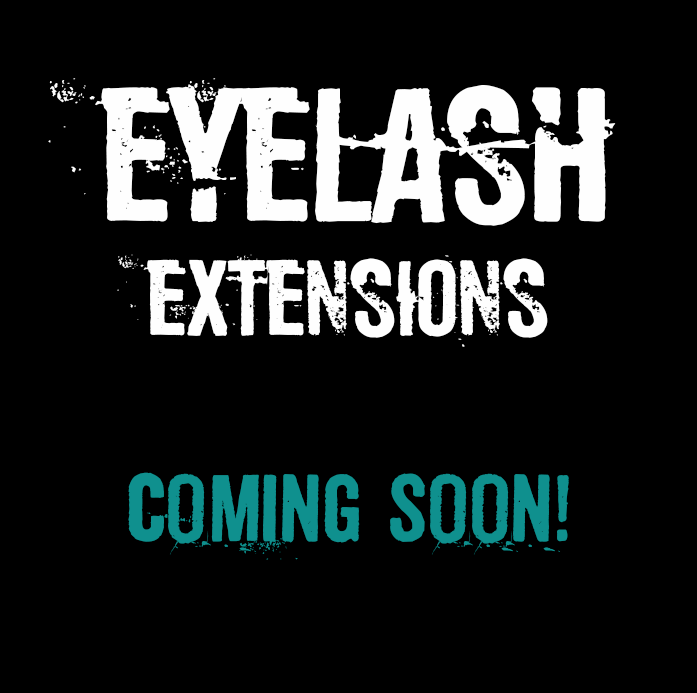
<style>
.page{position:relative;width:697px;height:693px;background:#000000}
.page>*{position:absolute;margin:0}
.t1{font:208.3px "SonicBarrier";color:#fefefe}
.t2{font:116.7px "SonicBarrier";color:#fefefe}
.t3{font:104.2px "SonicBarrier";color:#0f908e}
.t4{font:75px "SonicBarrier";color:#0f908e}
</style>
<div class="page">
<p class="t1" style="left:48px;top:78px;width:568px;height:148px">eyelash</p>
<p class="t2" style="left:117px;top:254px;width:431px;height:93px">extensions</p>
<p class="t3" style="left:128px;top:472px;width:441px;height:88px"><span class="t4">  </span> COMING SOON!</p>
</div>
